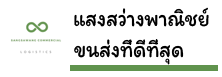
<style>
.page{position:relative;width:222px;height:77px;background:#ffffff}
.page>*{position:absolute;margin:0}
.t1{font:24.2px "Itim-Regular";color:#000000;scale:0.86 1}
</style>
<div class="page">
<p class="t1" style="left:74px;top:7px;width:135px;height:20px">แสงสว่างพาณิชย์</p>
<p class="t1" style="left:74px;top:39px;width:110px;height:26px">ขนส่งที่ดีที่สุด</p>
</div>
